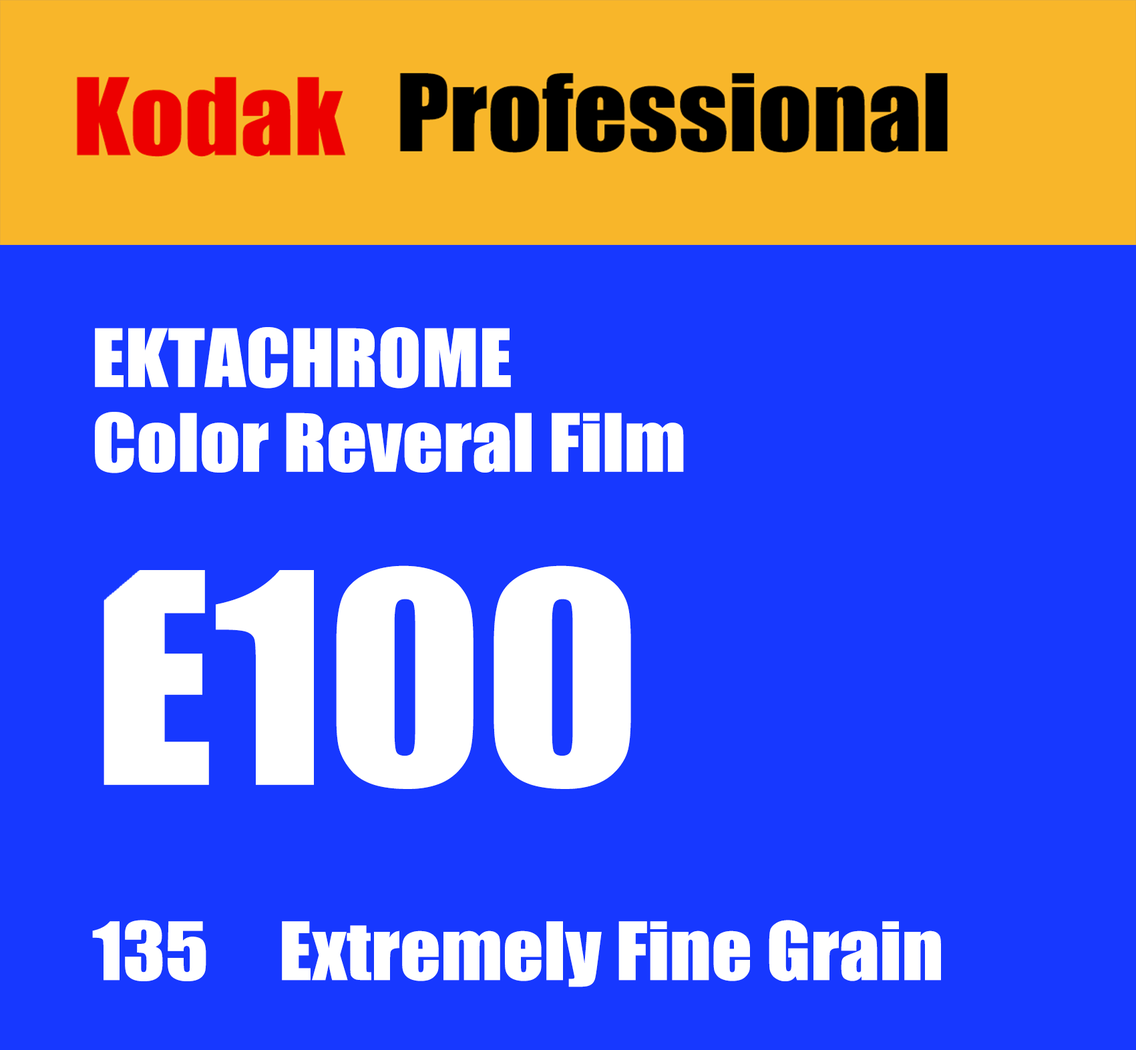
<style>
.page{position:relative;width:1136px;height:1050px;background:#1738ff}
.page>*{position:absolute;margin:0}
.t1{font:74.1px "Impact";color:#ffffff;scale:1.08 1}
.t2{font:271.6px "Impact";color:#ffffff;scale:1.08 1}
</style>
<div class="page">
<p class="t1" style="left:95px;top:327px;width:416px;height:62px">EKTACHROME</p>
<p class="t1" style="left:95px;top:412px;width:589px;height:61px">Color Reveral Film</p>
<p class="t2" style="left:103px;top:565px;width:528px;height:224px">E100</p>
<p class="t1" style="left:92px;top:920px;width:849px;height:67px">135     Extremely Fine Grain</p>
</div>
